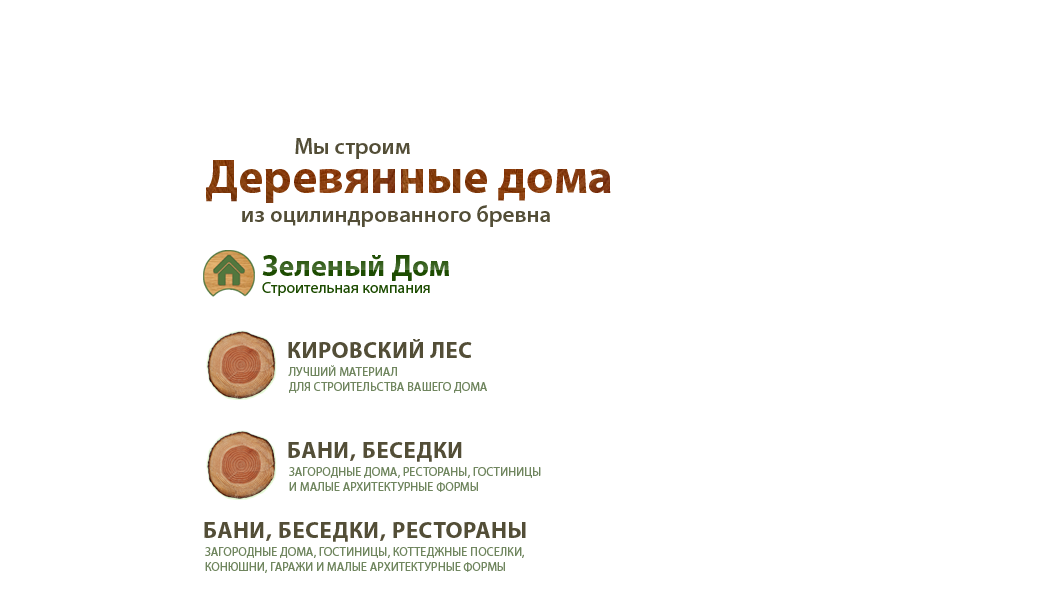
<style>
.page{position:relative;width:1040px;height:600px;background:#ffffff}
.page>*{position:absolute;margin:0}
.t1{font:23px "MyriadPro-Semibold";color:#534e37}
.t2{font:48px "MyriadPro-Bold";color:#853c0f}
.t3{font:30px "MyriadPro-Bold";color:#2f5a15}
.t4{font:16px "MyriadPro-Regular";color:#1d4c01}
.t5{font:23px "MyriadPro-Bold";letter-spacing:0.025em;color:#534e37;text-transform:uppercase}
.t6{font:12px/15px "MyriadPro-Regular";letter-spacing:0.015em;color:#70865f;text-transform:uppercase}
</style>
<div class="page">
<p class="t1" style="left:295px;top:138px;width:115px;height:21px">Мы строим</p>
<p class="t2" style="left:206px;top:160px;width:405px;height:43px">Деревянные дома</p>
<p class="t1" style="left:242px;top:205px;width:308px;height:22px">из оцилиндрованного бревна</p>
<p class="t3" style="left:262px;top:255px;width:187px;height:26px">Зеленый Дом</p>
<p class="t4" style="left:262px;top:282px;width:168px;height:14px">Строительная компания</p>
<p class="t5" style="left:288px;top:339px;width:184px;height:19px">кировский лес</p>
<p class="t6" style="left:288px;top:365px;width:199px;height:28px">лучший материал<br>для строительства вашего дома</p>
<p class="t5" style="left:288px;top:442px;width:174px;height:20px">Бани, Беседки</p>
<p class="t6" style="left:289px;top:467px;width:252px;height:25px">загородные дома, Рестораны, гостиницы<br>и малые архитектурные формы</p>
</div>
